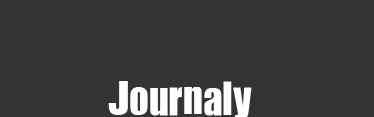
<style>
.page{position:relative;width:374px;height:117px;background:#333333}
.page>*{position:absolute;margin:0}
.t1{font:50px "JCHEadA";color:#ffffff}
</style>
<div class="page">
<p class="t1" style="left:108px;top:81px;width:144px;height:38px">Journaly</p>
</div>
